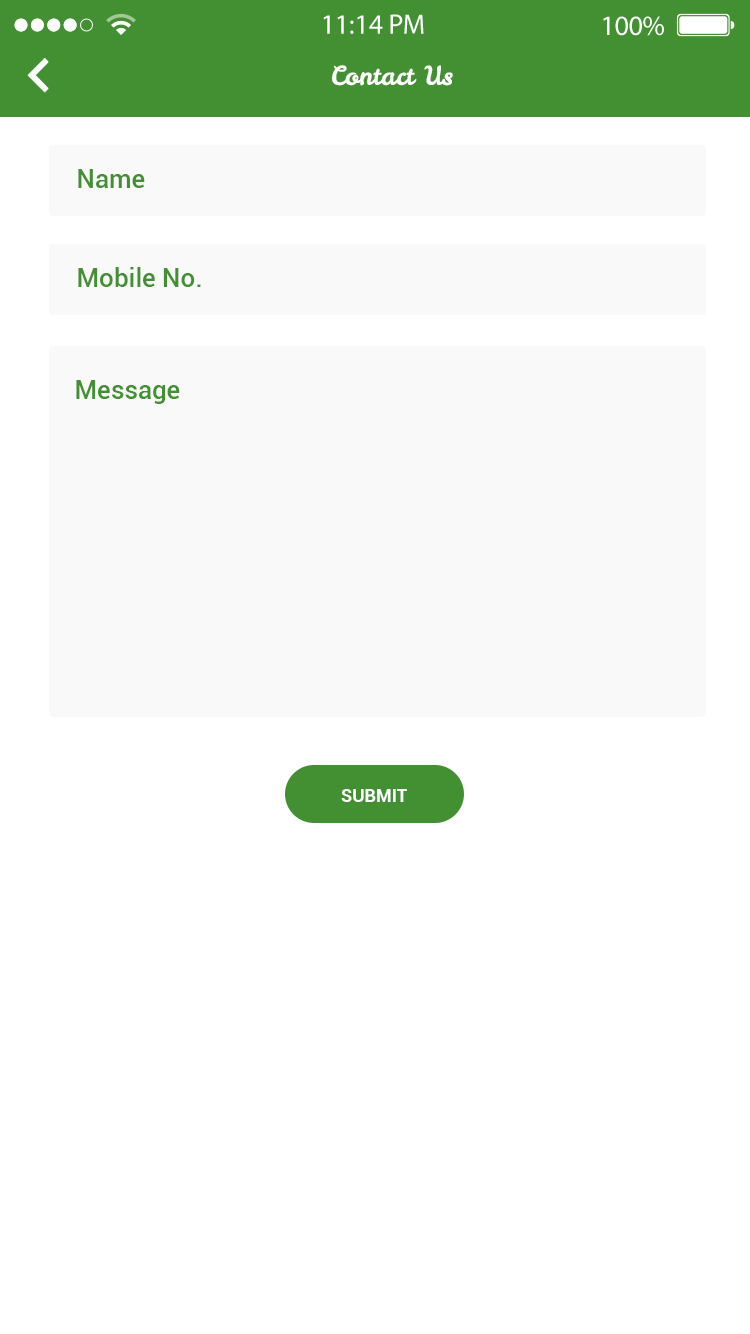
<style>
.page{position:relative;width:750px;height:1334px;background:#ffffff}
.page>*{position:absolute;margin:0}
.t1{font:26px "LeckerliOne-Regular";color:#ffffff}
.t2{font:26px "Roboto-Medium";color:#439033}
.t3{font:18px "Roboto-Bold";color:#ffffff}
</style>
<div class="page">
<p class="t1" style="left:332px;top:65px;width:121px;height:21px">Contact Us</p>
<p class="t2" style="left:78px;top:169px;width:67px;height:19px">Name</p>
<p class="t2" style="left:78px;top:267px;width:123px;height:20px">Mobile No.</p>
<p class="t2" style="left:76px;top:380px;width:104px;height:24px">Message</p>
<p class="t3" style="left:341px;top:789px;width:66px;height:13px">SUBMIT</p>
</div>
